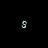
<style>
.page{position:relative;width:48px;height:48px;background:#000000}
.page>*{position:absolute;margin:0}
.t1{font:8.8px "AvantGardeLT-ExtraLightObl";color:#cdf8fd;text-transform:uppercase}
</style>
<div class="page">
<p class="t1" style="left:21px;top:21px;width:6px;height:7px">S</p>
</div>
